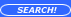
<style>
.page{position:relative;width:71px;height:17px;background:#3067ff}
.page>*{position:absolute;margin:0}
.t1{font:8px "Verdana-BoldItalic";color:#f8faff}
</style>
<div class="page">
<p class="t1" style="left:17px;top:7px;width:40px;height:6px">SEARCH!</p>
</div>
